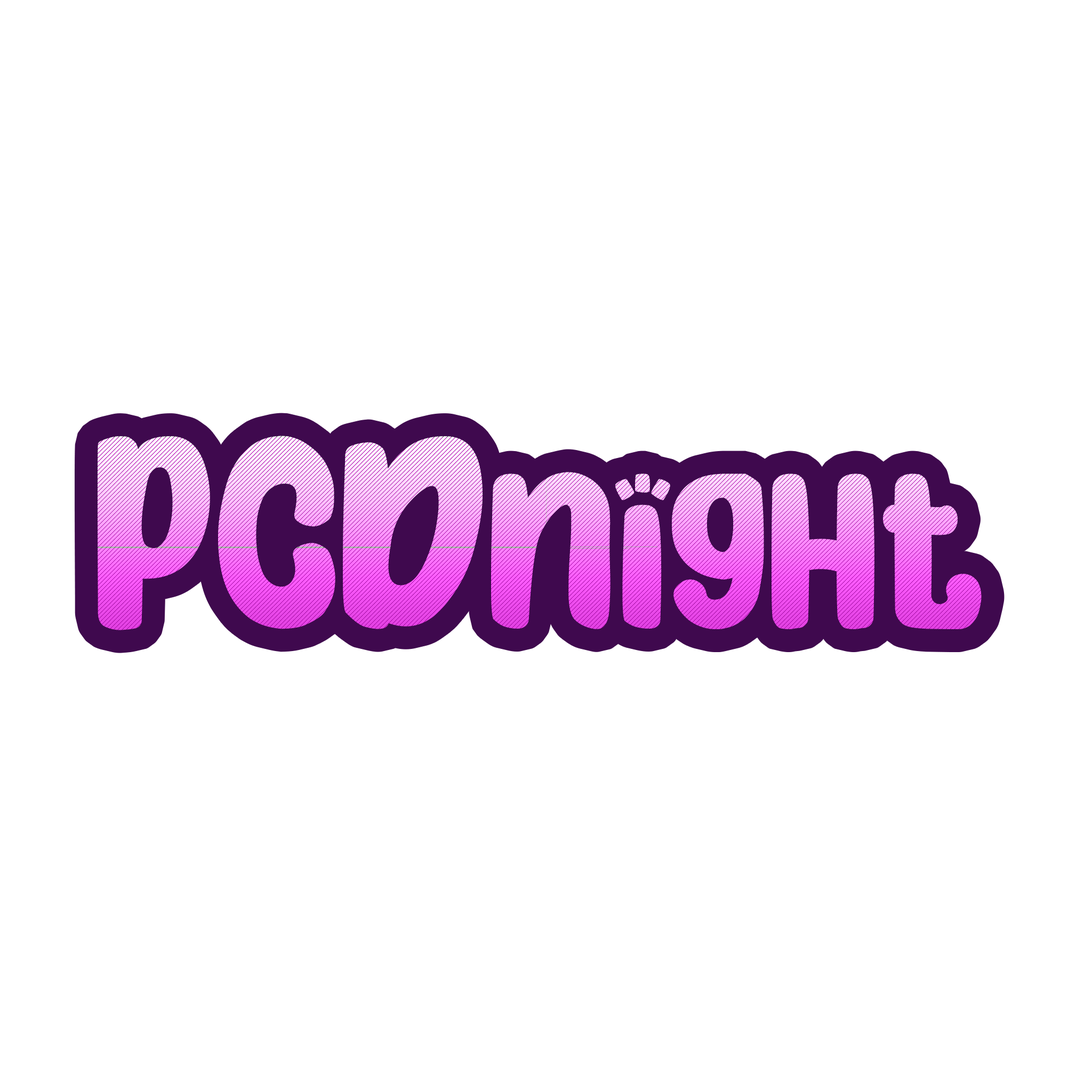
<style>
.page{position:relative;width:1092px;height:1092px;background:#ffffff}
.page>*{position:absolute;margin:0}
.t1{font:278.9px "Bubblekids"}
</style>
<div class="page">
<p class="t1" style="left:98px;top:436px;width:884px;height:194px">PCDnight</p>
</div>
